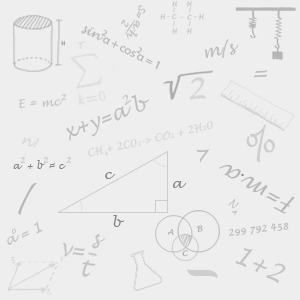
<style>
.page{position:relative;width:300px;height:300px;background:#eeeeee}
.page>*{position:absolute;margin:0}
.t1{font:17.2px "LucidaHandwriting-Italic";color:#bebebe}
.t2{font:24px "LucidaHandwriting-Italic";color:#bebebe}
.t3{font:11.6px "LucidaHandwriting-Italic";color:#c7c7c7}
.t4{font:7.4px "LucidaHandwriting-Italic";color:#c7c7c7;scale:1.17 1}
.t5{font:20.8px "LucidaHandwriting-Italic";color:#bebebe;scale:0.95 1}
.t6{font:11.8px "LucidaHandwriting-Italic";color:#c7c7c7;scale:1.17 1}
.t7{font:36.4px "LucidaHandwriting-Italic";color:#cecece}
.t8{font:14px "LucidaHandwriting-Italic";color:#d8d8d8}
.t9{font:9.7px "LucidaHandwriting-Italic";color:#838383}
.t10{font:22.2px "LucidaHandwriting-Italic";color:#b8b8b8}
.t11{font:15.6px "LucidaHandwriting-Italic";color:#838383}
.t12{font:31.8px "LucidaHandwriting-Italic";color:#b8b8b8}
.t13{font:10px "LucidaHandwriting-Italic";color:#c4c4c4}
.t14{font:14px "LucidaHandwriting-Italic";color:#c2c2c2}
.t15{font:9px "LucidaHandwriting-Italic";color:#bebebe}
.t16{font:6px "LucidaHandwriting-Italic";color:#c1c1c1}
.t17{font:26.2px "LucidaHandwriting-Italic";color:#c4c4c4}
.t18{font:72px "LucidaHandwriting-Italic";color:#cecece}
</style>
<div class="page">
<p class="t1" style="left:204px;top:39px;width:35px;height:19px;rotate:-12deg">m/s</p>
<p class="t2" style="left:253px;top:70px;width:15px;height:8px;rotate:-1deg">=</p>
<p class="t3" style="left:18px;top:98px;width:45px;height:11px;rotate:-4deg">E = mc</p>
<p class="t4" style="left:61px;top:94px;width:6px;height:6px;rotate:-3deg">2</p>
<p class="t5" style="left:66px;top:94px;width:83px;height:47px;rotate:-20deg">x+y=a b</p>
<p class="t6" style="left:122px;top:94px;width:10px;height:12px;rotate:-34deg">2</p>
<p class="t7" style="left:246px;top:124px;width:29px;height:38px;rotate:-29deg">%</p>
<p class="t8" style="left:22px;top:137px;width:18px;height:11px;rotate:18deg">n!</p>
<p class="t2" style="left:196px;top:149px;width:13px;height:14px;rotate:-31deg">&gt;</p>
<p class="t9" style="left:13px;top:160px;width:53px;height:9px">a  + b  = c</p>
<p class="t4" style="left:20px;top:157px;width:6px;height:6px;rotate:-3deg">2</p>
<p class="t4" style="left:43px;top:157px;width:6px;height:6px;rotate:-3deg">2</p>
<p class="t4" style="left:66px;top:157px;width:6px;height:6px;rotate:-3deg">2</p>
<p class="t10" style="left:219px;top:165px;width:76px;height:49px;rotate:-150deg">F=m a</p>
<p class="t11" style="left:241px;top:174px;width:3px;height:2px">.</p>
<p class="t12" style="left:18px;top:183px;width:19px;height:32px">/</p>
<p class="t13" style="left:228px;top:198px;width:11px;height:17px;rotate:39deg">NA</p>
<p class="t14" style="left:7px;top:221px;width:36px;height:24px;rotate:-23deg">a = 1</p>
<p class="t15" style="left:229px;top:222px;width:60px;height:14px;rotate:-7deg">299 792 458</p>
<p class="t16" style="left:12px;top:228px;width:4px;height:6px;rotate:-16deg">0</p>
<p class="t17" style="left:235px;top:247px;width:51px;height:37px;rotate:27deg">1+2</p>
<p class="t18" style="left:187px;top:269px;width:31px;height:9px">_</p>
</div>
